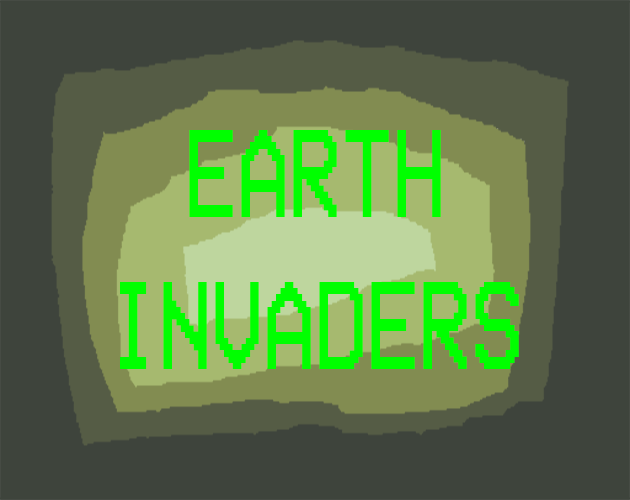
<style>
.page{position:relative;width:630px;height:500px;background:#3e443c}
.page>*{position:absolute;margin:0}
.t1{font:126.8px "VCROSDMono";color:#00ff00;scale:0.7 1}
</style>
<div class="page">
<p class="t1" style="left:120px;top:130px;width:399px;height:239px;text-align:center">EARTH<br>INVADERS</p>
</div>
